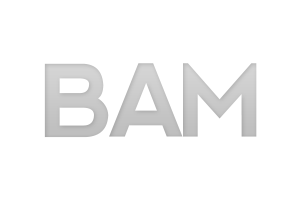
<style>
.page{position:relative;width:300px;height:200px;background:#ffffff}
.page>*{position:absolute;margin:0}
.t1{font:100px "nevis-Bold";letter-spacing:-0.1em;color:#c6c6c6}
</style>
<div class="page">
<p class="t1" style="left:44px;top:63px;width:213px;height:75px">BAM</p>
</div>
